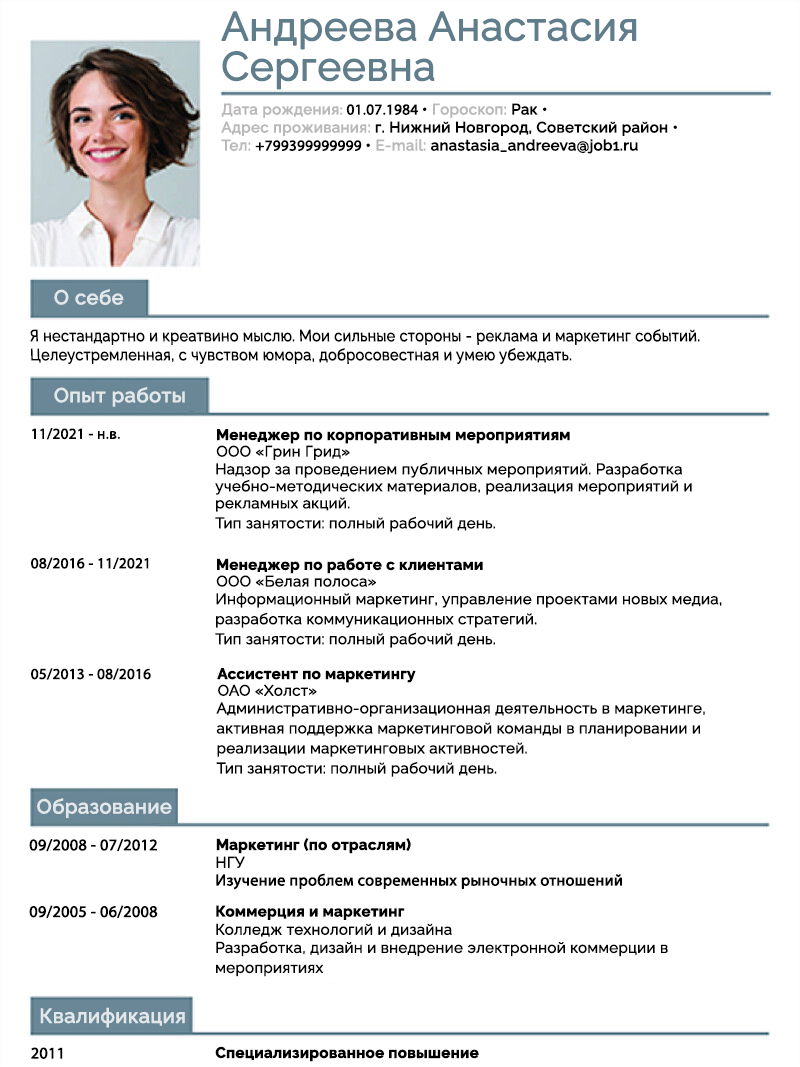
<style>
.page{position:relative;width:800px;height:1067px;background:#ffffff}
.page>*{position:absolute;margin:0}
.t1{font:40px/40px "Raleway-Regular";color:#607d8b;font-weight:bold}
.t2{font:15px/18px "Raleway-Medium";color:#000000;font-weight:bold}
.t3{font:15px/18px "Raleway-Medium";color:#bbb8b8;font-weight:bold}
.t4{font:15px/18px "MyriadPro-Regular";color:#bbb8b8;font-weight:bold}
.t5{font:15px/18px "MyriadPro-Regular";color:#000000;font-weight:bold}
.t6{font:20px "Raleway-Medium";color:#e2e7e9;font-weight:bold}
.t7{font:16px/19px "Raleway-Regular";color:#000000;font-weight:bold;scale:0.9 1}
.t8{font:15px "MyriadPro-Regular";color:#000000;font-weight:bold}
.t9{font:15px "Raleway-Bold";color:#000000;font-weight:bold}
.t10{font:15px "Raleway-Regular";color:#000000;font-weight:bold}
.t11{font:15px/17px "Raleway-Regular";color:#000000;font-weight:bold}
.t12{font:15px/20px "Raleway-Regular";color:#000000;font-weight:bold}
.t13{font:16px "MyriadPro-Regular";color:#000000;font-weight:bold}
</style>
<div class="page">
<p class="t1" style="left:221px;top:11px;width:416px;height:79px">Андреева Анастасия<br>Сергеевна</p>
<p class="t2" style="left:221px;top:103px;width:456px;height:51px"><span class="t3">Дата рождения</span><span class="t4">: </span><span class="t5">01.07.1984 </span>• <span class="t3">Гороскоп:</span> Рак • <br><span class="t3">Адрес проживания:</span> г. Нижний Новгород, Советский район • <br><span class="t3">Тел: </span><span class="t5">+799399999999 </span>• <span class="t3">E-mail:</span> anastasia_andreeva@job1.ru</p>
<p class="t6" style="left:54px;top:289px;width:70px;height:16px">О себе</p>
<p class="t7" style="left:30px;top:329px;width:670px;height:35px">Я нестандартно и креатвино мыслю. Мои сильные стороны - реклама и маркетинг событий. Целеустремленная, с чувством юмора, добросовестная и умею убеждать.</p>
<p class="t6" style="left:54px;top:387px;width:131px;height:20px">Опыт работы</p>
<p class="t8" style="left:32px;top:428px;width:88px;height:12px">11/2021 - н.в.</p>
<p class="t9" style="left:217px;top:429px;width:353px;height:15px">Менеджер по корпоративным мероприятиям</p>
<p class="t10" style="left:216px;top:445px;width:134px;height:15px">ООО «Грин Грид»</p>
<p class="t11" style="left:215px;top:462px;width:477px;height:70px">Надзор за проведением публичных мероприятий. Разработка учебно-методических материалов, реализация мероприятий и рекламных акций.<br><span class="t12">Тип занятости: полный рабочий день.</span></p>
<p class="t8" style="left:31px;top:557px;width:118px;height:12px">08/2016 - 11/2021</p>
<p class="t9" style="left:217px;top:558px;width:266px;height:16px">Менеджер по работе с клиентами</p>
<p class="t10" style="left:216px;top:575px;width:160px;height:12px">ООО «Белая полоса»</p>
<p class="t12" style="left:215px;top:592px;width:507px;height:56px">Информационный маркетинг, управление проектами новых медиа, разработка коммуникационных стратегий.<br>Тип занятости: полный рабочий день.</p>
<p class="t8" style="left:31px;top:668px;width:120px;height:12px">05/2013 - 08/2016</p>
<p class="t9" style="left:217px;top:668px;width:199px;height:15px">Ассистент по маркетингу</p>
<p class="t10" style="left:218px;top:684px;width:99px;height:12px">ОАО «Холст»</p>
<p class="t12" style="left:216px;top:702px;width:489px;height:75px">Административно-организационная деятельность в маркетинге, активная поддержка маркетинговой команды в планировании и реализации маркетинговых активностей.<br>Тип занятости: полный рабочий день.</p>
<p class="t6" style="left:37px;top:798px;width:135px;height:20px">Образование</p>
<p class="t13" style="left:29px;top:839px;width:128px;height:13px">09/2008 - 07/2012</p>
<p class="t9" style="left:216px;top:838px;width:195px;height:16px">Маркетинг (по отраслям)</p>
<p class="t10" style="left:216px;top:856px;width:29px;height:12px">НГУ</p>
<p class="t13" style="left:216px;top:873px;width:406px;height:17px">Изучение проблем современных рыночных отношений</p>
<p class="t13" style="left:29px;top:905px;width:129px;height:13px">09/2005 - 06/2008</p>
<p class="t9" style="left:216px;top:905px;width:189px;height:15px">Коммерция и маркетинг</p>
<p class="t10" style="left:216px;top:923px;width:236px;height:14px">Колледж технологий и дизайна</p>
<p class="t12" style="left:216px;top:941px;width:452px;height:36px">Разработка, дизайн и внедрение электронной коммерции в мероприятиях</p>
<p class="t6" style="left:40px;top:1007px;width:145px;height:21px">Квалификация</p>
<p class="t13" style="left:31px;top:1047px;width:32px;height:12px">2011</p>
<p class="t9" style="left:215px;top:1046px;width:264px;height:16px">Специализированное повышение</p>
</div>
